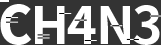
<style>
.page{position:relative;width:161px;height:45px;background:#333333}
.page>*{position:absolute;margin:0}
.t1{font:51.8px "NotoSansCJKkr-Bold";letter-spacing:-0.04em;color:#ffffff}
.t2{font:51.8px "NotoSansCJKkr-Black";letter-spacing:-0.04em;color:#ffffff}
</style>
<div class="page">
<p class="t1" style="left:0px;top:4px;width:160px;height:41px"><span class="t2">C</span>H4N3</p>
</div>
